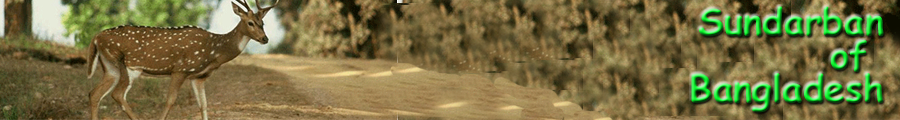
<style>
.page{position:relative;width:900px;height:120px}
.page>*{position:absolute;margin:0}
.t1{font:36.9px/33.3px "ComicSansMS-Bold"}
</style>
<div class="page">
<p class="t1" style="left:691px;top:6px;width:193px;height:107px;text-align:right">Sundarban<br>of <br>Bangladesh</p>
</div>
